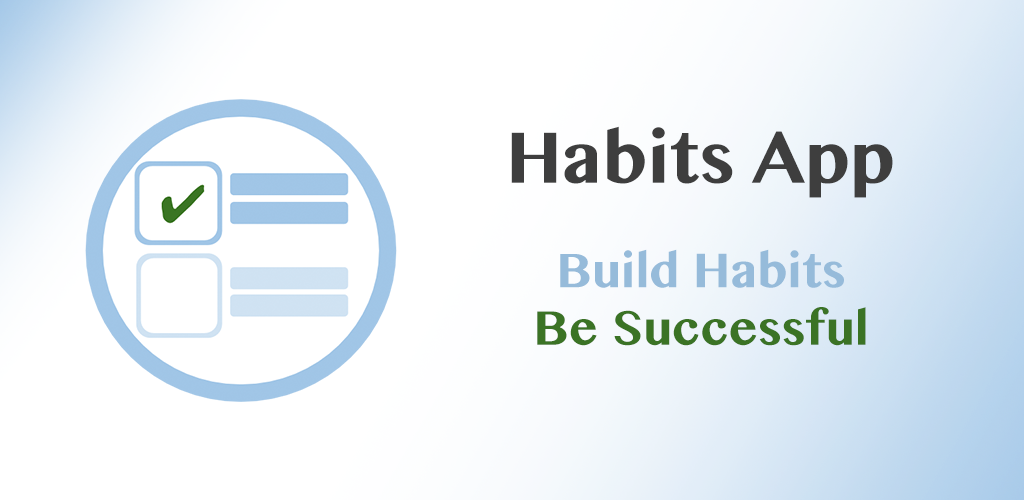
<style>
.page{position:relative;width:1024px;height:500px;background:#ffffff}
.page>*{position:absolute;margin:0}
.t1{font:72px "TamilMN-Bold";color:#3e3e3e}
.t2{font:48px "TamilMN-Bold";color:#3b7325}
.t3{font:48px "TamilMN-Bold";color:#96bbda}
</style>
<div class="page">
<p class="t1" style="left:511px;top:126px;width:382px;height:72px">Habits App</p>
<p class="t2" style="left:537px;top:249px;width:329px;height:97px;text-align:center"><span class="t3">Build Habits<br></span>Be Successful</p>
</div>
